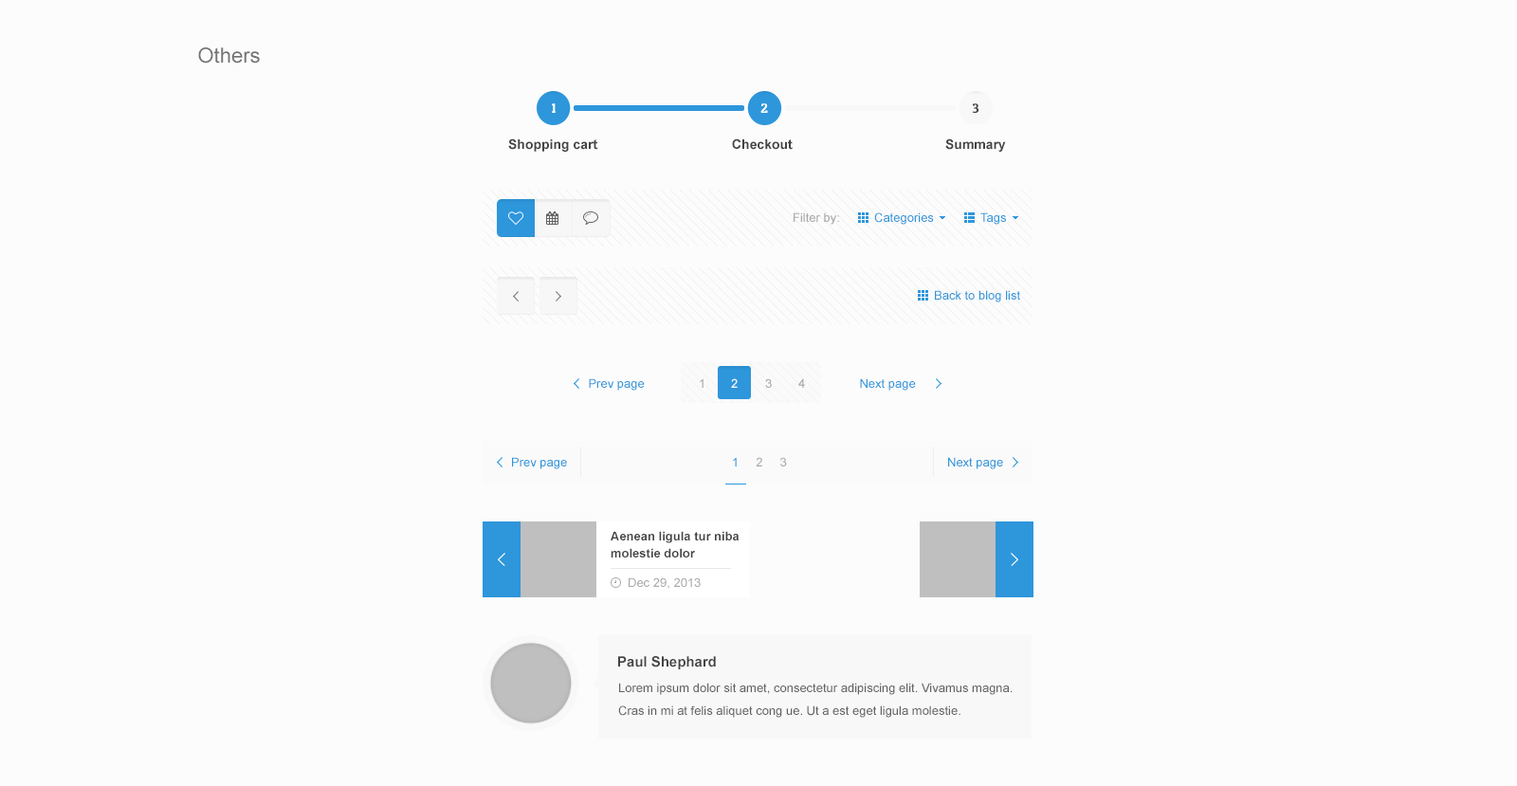
<style>
.page{position:relative;width:1517px;height:786px;background:#fcfcfc}
.page>*{position:absolute;margin:0}
.t1{font:20.9px "ArialMT";color:#737373}
.t2{font:13.3px "PatuaOne-Regular";color:#ffffff}
.t3{font:13.3px "PatuaOne-Regular";color:#444444}
.t4{font:13.3px "Arial-BoldMT";color:#444444}
.t5{font:12.3px "ArialMT";color:#a8a8a8}
.t6{font:12.3px "ArialMT";color:#2e96db}
.t7{font:12.3px "ArialMT";color:#ffffff}
.t8{font:12.3px/17.1px "Arial-BoldMT";color:#444444}
.t9{font:14.2px "Arial-BoldMT";color:#444444}
.t10{font:12.3px/22.8px "ArialMT";color:#626262}
</style>
<div class="page">
<p class="t1" style="left:198px;top:47px;width:62px;height:17px">Others</p>
<p class="t2" style="left:552px;top:103px;width:4px;height:10px">1</p>
<p class="t2" style="left:760px;top:103px;width:8px;height:10px">2</p>
<p class="t3" style="left:972px;top:103px;width:7px;height:10px">3</p>
<p class="t4" style="left:508px;top:138px;width:90px;height:14px">Shopping cart</p>
<p class="t4" style="left:732px;top:138px;width:61px;height:12px">Checkout</p>
<p class="t4" style="left:945px;top:138px;width:61px;height:14px">Summary</p>
<p class="t5" style="left:794px;top:212px;width:45px;height:13px">Filter by:</p>
<p class="t6" style="left:874px;top:212px;width:60px;height:13px">Categories</p>
<p class="t6" style="left:980px;top:212px;width:26px;height:13px">Tags</p>
<p class="t6" style="left:935px;top:290px;width:85px;height:12px">Back to blog list</p>
<p class="t6" style="left:589px;top:378px;width:56px;height:13px">Prev page</p>
<p class="t5" style="left:700px;top:378px;width:4px;height:10px">1</p>
<p class="t7" style="left:731px;top:378px;width:7px;height:10px">2</p>
<p class="t5" style="left:765px;top:378px;width:7px;height:10px">3</p>
<p class="t5" style="left:798px;top:378px;width:7px;height:10px">4</p>
<p class="t6" style="left:860px;top:378px;width:56px;height:13px">Next page</p>
<p class="t6" style="left:512px;top:457px;width:55px;height:12px">Prev page</p>
<p class="t5" style="left:733px;top:457px;width:54px;height:9px"><span class="t6">1</span>     2     3</p>
<p class="t6" style="left:948px;top:457px;width:55px;height:12px">Next page</p>
<p class="t8" style="left:611px;top:531px;width:129px;height:27px">Aenean ligula tur niba molestie dolor</p>
<p class="t5" style="left:629px;top:577px;width:72px;height:12px">Dec 29, 2013</p>
<p class="t9" style="left:618px;top:656px;width:98px;height:13px">Paul Shephard</p>
<p class="t10" style="left:618px;top:683px;width:395px;height:35px">Lorem ipsum dolor sit amet, consectetur adipiscing elit. Vivamus magna. Cras in mi at felis aliquet cong ue. Ut a est eget ligula molestie.</p>
</div>
